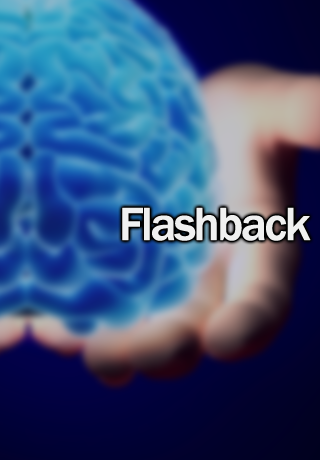
<style>
.page{position:relative;width:320px;height:460px}
.page>*{position:absolute;margin:0}
.t1{font:48px "FranklinGothic-Medium";letter-spacing:-0.075em;color:#f0f0f0;font-weight:bold}
</style>
<div class="page">
<p class="t1" style="left:122px;top:207px;width:189px;height:34px">Flashback</p>
</div>
